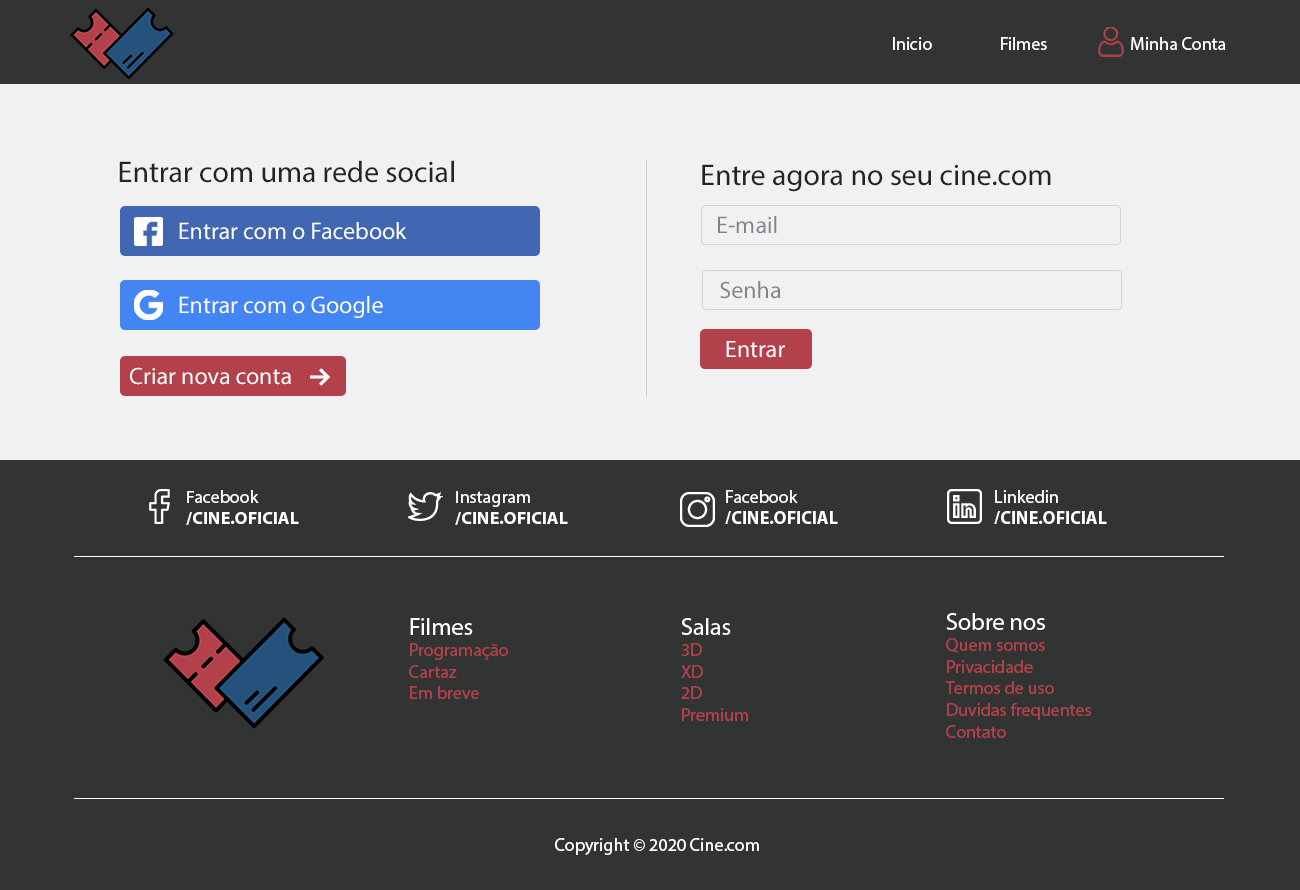
<style>
.page{position:relative;width:1300px;height:890px;background:#323433}
.page>*{position:absolute;margin:0}
.t1{font:18px "MyriadPro-Regular";color:#ffffff}
.t2{font:30px "MyriadPro-Regular";color:#212529}
.t3{font:24px "MyriadPro-Regular";color:#ffffff}
.t4{font:24px "MyriadPro-Regular";color:#7d858c}
.t5{font:23.9px "MyriadPro-Regular";color:#7d858c}
.t6{font:23.9px "MyriadPro-Regular";color:#ffffff}
.t7{font:17.8px "MyriadPro-Bold";color:#ffffff}
.t8{font:17.8px "MyriadPro-Regular";color:#ffffff}
.t9{font:18px "MyriadPro-Bold";color:#ffffff}
.t10{font:18px "MyriadPro-Regular";color:#b3414b}
</style>
<div class="page">
<p class="t1" style="left:893px;top:37px;width:333px;height:13px">Inicio  Filmes        Minha Conta</p>
<p class="t2" style="left:119px;top:160px;width:335px;height:23px">Entrar com uma rede social</p>
<p class="t2" style="left:702px;top:164px;width:349px;height:28px">Entre agora no seu cine.com</p>
<p class="t3" style="left:179px;top:222px;width:228px;height:18px">Entrar com o Facebook</p>
<p class="t4" style="left:718px;top:216px;width:59px;height:18px">E-mail</p>
<p class="t5" style="left:720px;top:281px;width:61px;height:18px">Senha</p>
<p class="t3" style="left:179px;top:296px;width:204px;height:22px">Entrar com o Google</p>
<p class="t6" style="left:726px;top:341px;width:59px;height:17px">Entrar</p>
<p class="t6" style="left:130px;top:367px;width:161px;height:18px">Criar nova conta</p>
<p class="t7" style="left:186px;top:490px;width:113px;height:35px"><span class="t8">Facebook<br></span>/CINE.OFICIAL</p>
<p class="t7" style="left:455px;top:491px;width:113px;height:34px"><span class="t8">Instagram<br></span>/CINE.OFICIAL</p>
<p class="t9" style="left:725px;top:490px;width:113px;height:34px"><span class="t1">Facebook<br></span>/CINE.OFICIAL</p>
<p class="t9" style="left:994px;top:490px;width:113px;height:34px"><span class="t1">Linkedin<br></span>/CINE.OFICIAL</p>
<p class="t10" style="left:945px;top:613px;width:146px;height:125px"><span class="t3">Sobre nos<br></span>Quem somos<br>Privacidade<br>Termos de uso<br>Duvidas frequentes<br>Contato</p>
<p class="t10" style="left:409px;top:618px;width:99px;height:81px"><span class="t3">Filmes<br></span>Programação<br>Cartaz<br>Em breve</p>
<p class="t10" style="left:681px;top:618px;width:67px;height:103px"><span class="t3">Salas<br></span>3D<br>XD<br>2D<br>Premium</p>
<p class="t1" style="left:555px;top:838px;width:204px;height:17px">Copyright © 2020 Cine.com</p>
</div>
